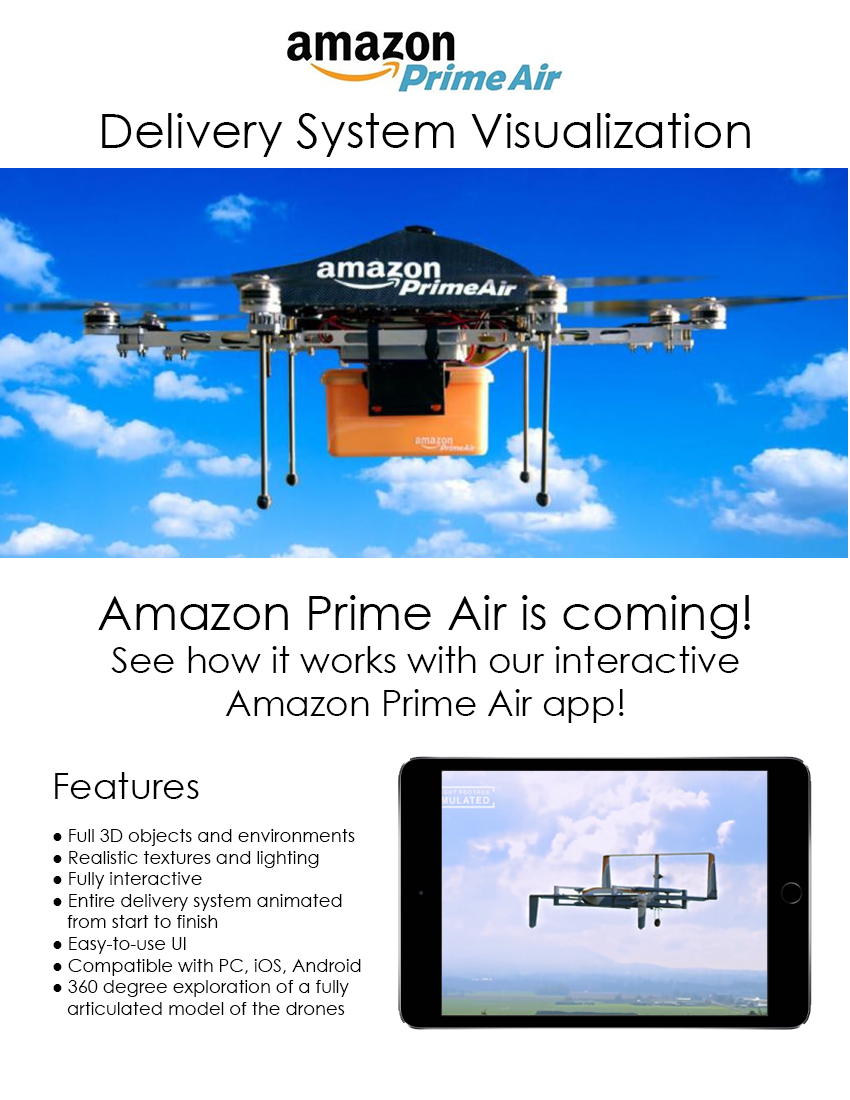
<style>
.page{position:relative;width:850px;height:1100px;background:#ffffff}
.page>*{position:absolute;margin:0}
.t1{font:48px "CenturyGothic";color:#000000}
.t2{font:36px "CenturyGothic";color:#000000}
.t3{font:18px "CenturyGothic";color:#000000}
</style>
<div class="page">
<p class="t1" style="left:102px;top:113px;width:648px;height:44px">Delivery System Visualization</p>
<p class="t2" style="left:98px;top:595px;width:652px;height:128px;text-align:center"><span class="t1">Amazon Prime Air is coming!<br></span>See how it works with our interactive Amazon Prime Air app!</p>
<p class="t3" style="left:53px;top:772px;width:308px;height:243px"><span class="t2">Features<br></span><br>● Full 3D objects and environments<br>● Realistic textures and lighting<br>● Fully interactive<br>● Entire delivery system animated<br>   from start to finish<br>● Easy-to-use UI<br>● Compatible with PC, iOS, Android<br>● 360 degree exploration of a fully<br>   articulated model of the drones</p>
</div>
